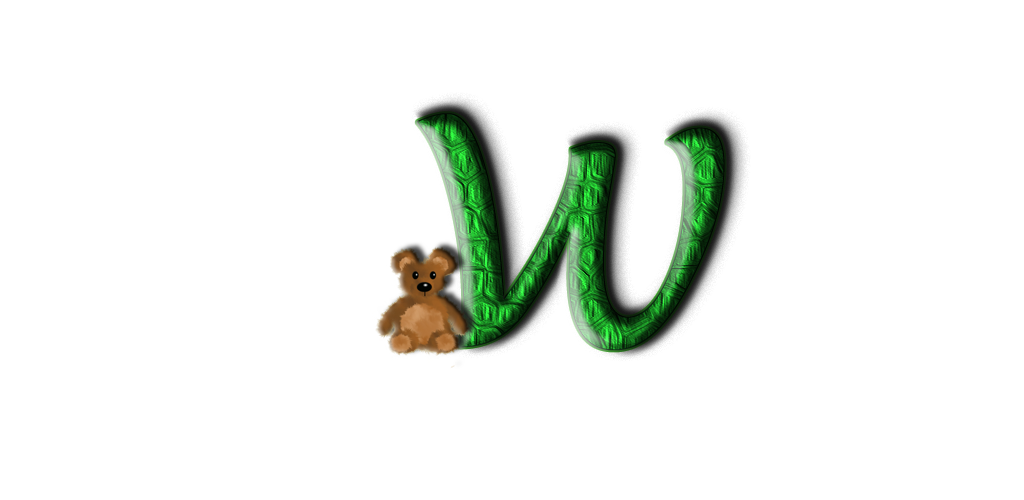
<style>
.page{position:relative;width:1024px;height:500px;background:#ffffff}
.page>*{position:absolute;margin:0}
.t1{font:400px "LucidaHandwriting-Italic"}
</style>
<div class="page">
<p class="t1" style="left:417px;top:114px;width:307px;height:236px">w</p>
</div>
